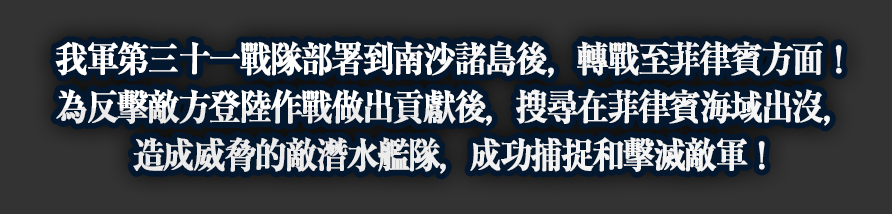
<style>
.page{position:relative;width:892px;height:214px;background:#333333}
.page>*{position:absolute;margin:0}
.t1{font:36px/48px "RyuminPro-Bold";letter-spacing:-0.08em;color:#ffffff;font-weight:bold;scale:0.9 1}
</style>
<div class="page">
<p class="t1" style="left:55px;top:41px;width:787px;height:133px;text-align:center">我軍第三十一戰隊部署到南沙諸島後，轉戰至菲律賓方面！<br>為反擊敵方登陸作戰做出貢獻後，搜尋在菲律賓海域出沒，<br>造成威脅的敵潛水艦隊，成功捕捉和擊滅敵軍！</p>
</div>
